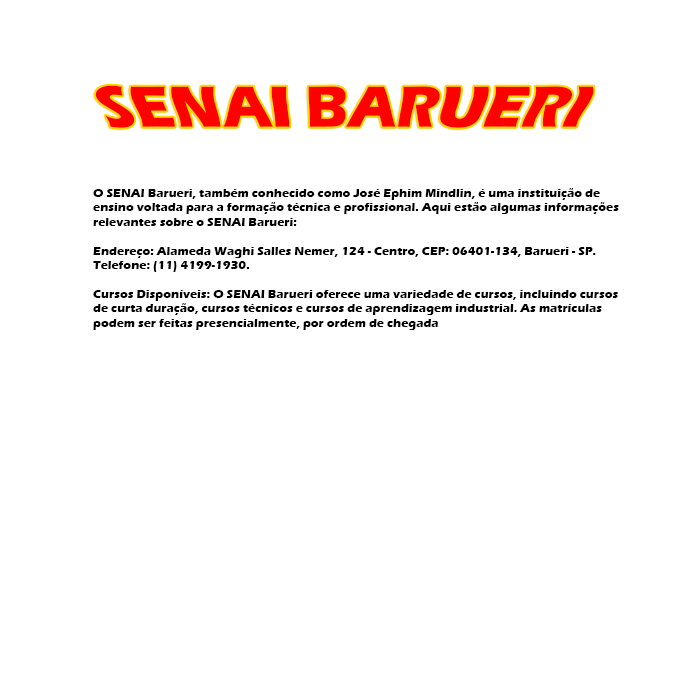
<style>
.page{position:relative;width:700px;height:700px;background:#ffffff}
.page>*{position:absolute;margin:0}
.t1{font:60px "ErasITC-Bold";color:#ff0000}
.t2{font:12px "ErasITC-Bold";color:#000000}
</style>
<div class="page">
<p class="t1" style="left:95px;top:85px;width:499px;height:43px">SENAI BARUERI</p>
<p class="t2" style="left:93px;top:188px;width:526px;height:142px">O SENAI Barueri, também conhecido como José Ephim Mindlin, é uma instituição de ensino voltada para a formação técnica e profissional. Aqui estão algumas informações relevantes sobre o SENAI Barueri:<br><br>Endereço: Alameda Waghi Salles Nemer, 124 - Centro, CEP: 06401-134, Barueri - SP.<br>Telefone: (11) 4199-1930.<br><br>Cursos Disponíveis: O SENAI Barueri oferece uma variedade de cursos, incluindo cursos de curta duração, cursos técnicos e cursos de aprendizagem industrial. As matrículas podem ser feitas presencialmente, por ordem de chegada</p>
</div>
